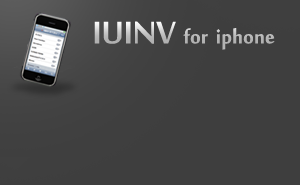
<style>
.page{position:relative;width:300px;height:185px;background:#3e3e3e}
.page>*{position:absolute;margin:0}
.t1{font:30px "MoolBoran";color:#bbbbbb}
.t2{font:48px "MoolBoran";color:#bbbbbb}
</style>
<div class="page">
<p class="t1" style="left:94px;top:21px;width:181px;height:29px"><span class="t2">IUINV</span>  for  iphone</p>
</div>
